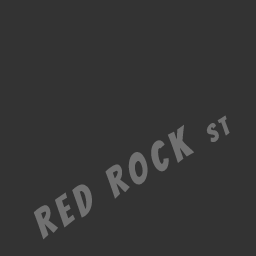
<style>
.page{position:relative;width:256px;height:256px;background:#333333}
.page>*{position:absolute;margin:0}
.t1{font:40px "Bangers-Regular";letter-spacing:0.16em;color:#717171}
.t2{font:24px "Bangers-Regular";letter-spacing:0.16em;color:#717171}
</style>
<div class="page">
<p class="t1" style="left:33px;top:115px;width:197px;height:125px;rotate:-30deg">RED ROCK <span class="t2">ST</span></p>
</div>
